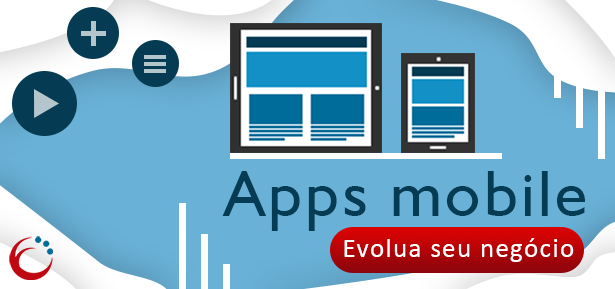
<style>
.page{position:relative;width:615px;height:289px;background:#69b1d7}
.page>*{position:absolute;margin:0}
.t1{font:65.4px "Humanist521BT-Roman";letter-spacing:0.05em;color:#063c53}
.t2{font:27px "Calibri";letter-spacing:0.05em;color:#ffffff}
</style>
<div class="page">
<p class="t1" style="left:222px;top:171px;width:363px;height:60px">Apps mobile</p>
<p class="t2" style="left:344px;top:238px;width:230px;height:24px">Evolua seu negócio</p>
</div>
